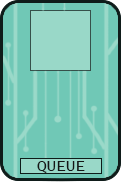
<style>
.page{position:relative;width:121px;height:182px;background:#70c8b6}
.page>*{position:absolute;margin:0}
.t1{font:16px "LucidaConsole";color:#171615}
</style>
<div class="page">
<p class="t1" style="left:37px;top:161px;width:48px;height:12px">QUEUE</p>
</div>
